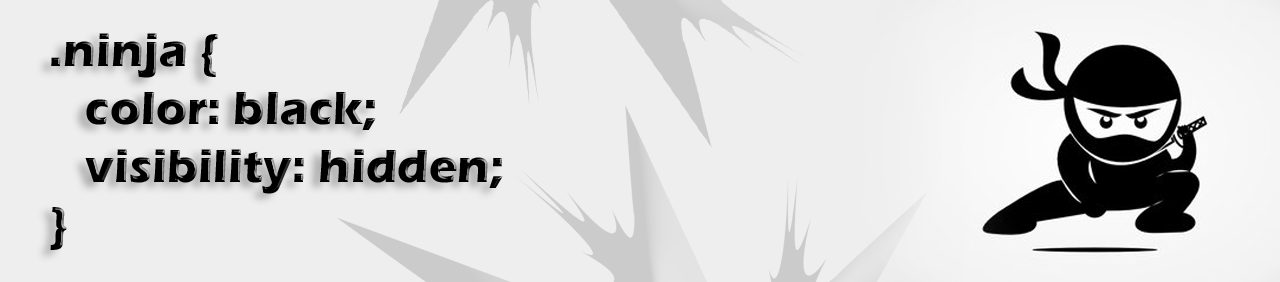
<style>
.page{position:relative;width:1280px;height:282px;background:#eeeeee}
.page>*{position:absolute;margin:0}
.t1{font:48px "ErasITC-Bold";color:#000000}
</style>
<div class="page">
<p class="t1" style="left:50px;top:33px;width:453px;height:217px">.ninja {<br> color: black;<br> visibility: hidden; <br>}</p>
</div>
